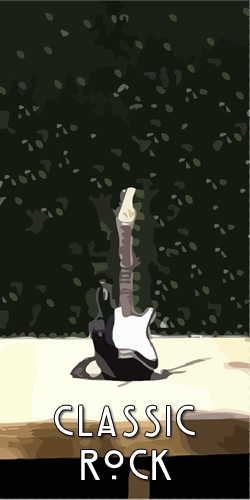
<style>
.page{position:relative;width:250px;height:500px;background:#141a10}
.page>*{position:absolute;margin:0}
.t1{font:38.9px "HillHouse";letter-spacing:0.02em;color:#ffffff}
</style>
<div class="page">
<p class="t1" style="left:54px;top:405px;width:141px;height:75px;text-align:center">Classic<br>Rock</p>
</div>
